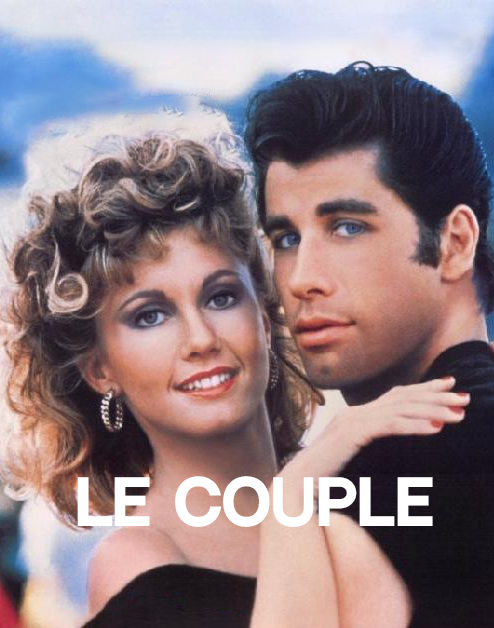
<style>
.page{position:relative;width:494px;height:628px}
.page>*{position:absolute;margin:0}
.t1{font:60.2px "NeutralFaceBold";letter-spacing:0.005em;color:#ffffff}
</style>
<div class="page">
<p class="t1" style="left:77px;top:476px;width:356px;height:51px">le couple</p>
</div>
